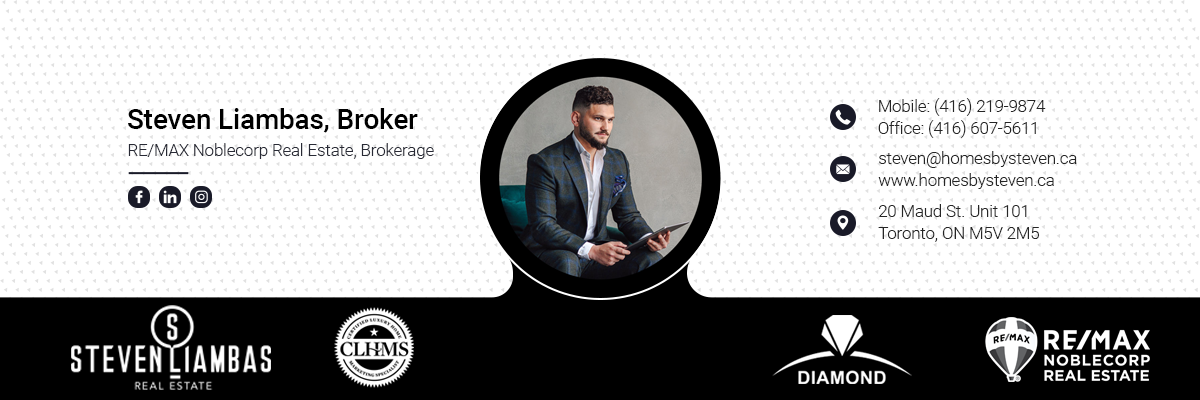
<style>
.page{position:relative;width:1200px;height:400px;background:#ffffff}
.page>*{position:absolute;margin:0}
.t1{font:16.6px/22.1px "Roboto-Light";color:#252525}
.t2{font:27.6px "Roboto-Medium";color:#000000}
.t3{font:16.6px "Roboto-Light";color:#282a35}
</style>
<div class="page">
<p class="t1" style="left:878px;top:98px;width:168px;height:40px">Mobile: (416) 219-9874<br>Office: (416) 607-5611</p>
<p class="t2" style="left:128px;top:108px;width:290px;height:25px">Steven Liambas, Broker</p>
<p class="t3" style="left:128px;top:143px;width:306px;height:16px">RE/MAX Noblecorp Real Estate, Brokerage</p>
<p class="t1" style="left:878px;top:151px;width:199px;height:38px">steven@homesbysteven.ca<br>www.homesbysteven.ca</p>
<p class="t1" style="left:878px;top:204px;width:162px;height:38px">20 Maud St. Unit 101 <br>Toronto, ON M5V 2M5</p>
</div>
